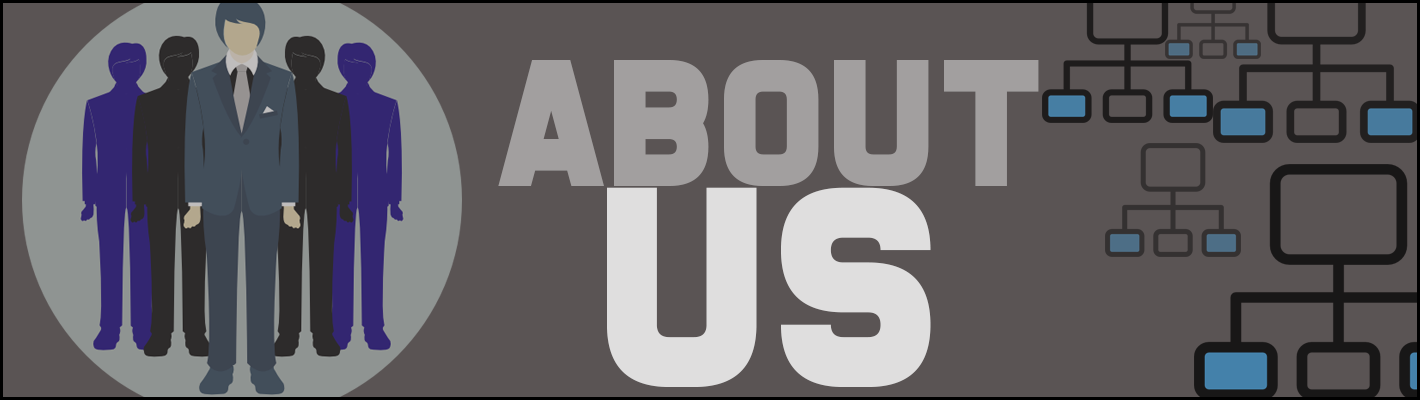
<style>
.page{position:relative;width:1420px;height:400px;background:#5a5454}
.page>*{position:absolute;margin:0}
.t1{font:160.7px "BoomerTantrum";color:#a29f9f}
.t2{font:255.4px "BoomerTantrum";color:#dfdede}
</style>
<div class="page">
<p class="t1" style="left:498px;top:60px;width:541px;height:126px">about</p>
<p class="t2" style="left:607px;top:187px;width:324px;height:200px">us</p>
</div>
